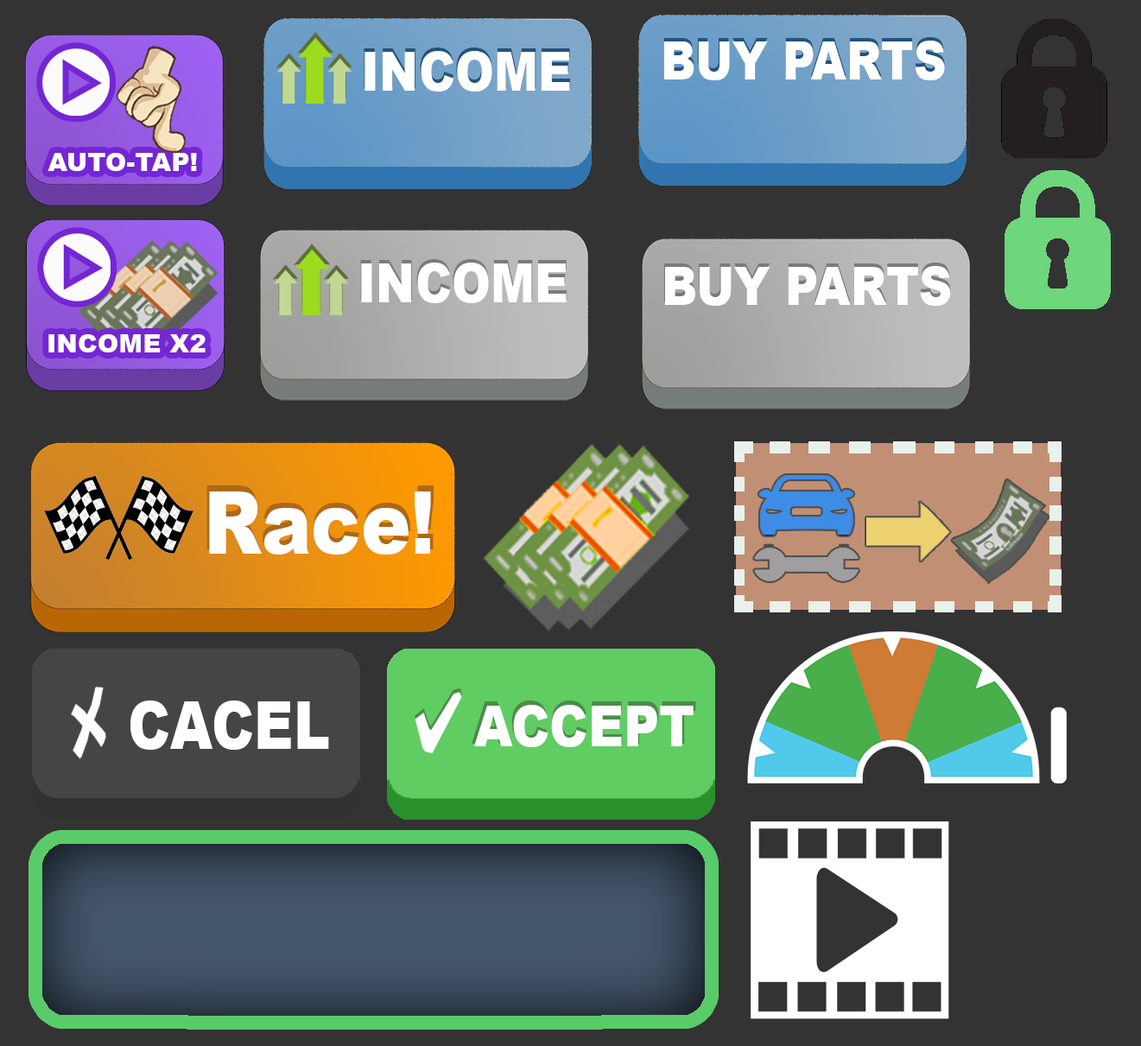
<style>
.page{position:relative;width:1141px;height:1046px;background:#333333}
.page>*{position:absolute;margin:0}
.t1{font:52.8px "Arial-Black";color:#ffffff;scale:0.86 1}
.t2{font:52.6px "Arial-Black";color:#ffffff;scale:0.86 1}
.t3{font:55px "Arial-Black";color:#ffffff;scale:0.86 1}
.t4{font:54.8px "Arial-Black";color:#ffffff;scale:0.86 1}
.t5{font:25.4px "Arial-Black";color:#ffffff}
.t6{font:53.9px "Arial-Black";color:#ffffff;scale:0.86 1}
.t7{font:53.7px "Arial-Black";color:#ffffff;scale:0.86 1}
.t8{font:25.5px "Arial-Black";color:#ffffff}
.t9{font:89.1px "Arial-Black";color:#ffffff;scale:0.86 1}
.t10{font:87px "Arial-Black";color:#ffffff;scale:0.86 1}
.t11{font:66.6px "Arial-Black";color:#ffffff;scale:0.82 1}
.t12{font:58.5px "Arial-Black";color:#ffffff;scale:0.86 1}
.t13{font:57.1px "Arial-Black";color:#ffffff;scale:0.86 1}
</style>
<div class="page">
<p class="t1" style="left:663px;top:37px;width:282px;height:40px">BUY PARTS</p>
<p class="t2" style="left:663px;top:41px;width:282px;height:39px">BUY PARTS</p>
<p class="t3" style="left:363px;top:47px;width:208px;height:42px">INCOME</p>
<p class="t4" style="left:364px;top:51px;width:206px;height:41px">INCOME</p>
<p class="t5" style="left:47px;top:153px;width:150px;height:18px">AUTO-TAP!</p>
<p class="t3" style="left:360px;top:259px;width:207px;height:41px">INCOME</p>
<p class="t4" style="left:361px;top:262px;width:205px;height:41px">INCOME</p>
<p class="t6" style="left:664px;top:262px;width:287px;height:40px">BUY PARTS</p>
<p class="t7" style="left:665px;top:266px;width:286px;height:40px">BUY PARTS</p>
<p class="t8" style="left:48px;top:334px;width:157px;height:18px">INCOME X2</p>
<p class="t9" style="left:206px;top:485px;width:227px;height:65px">Race!</p>
<p class="t10" style="left:209px;top:491px;width:222px;height:63px">Race!</p>
<p class="t11" style="left:130px;top:700px;width:199px;height:49px">CACEL</p>
<p class="t12" style="left:471px;top:700px;width:225px;height:44px">ACCEPT</p>
<p class="t13" style="left:474px;top:705px;width:219px;height:42px">ACCEPT</p>
</div>
